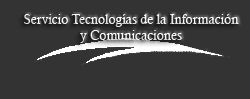
<style>
.page{position:relative;width:250px;height:99px;background:#333333}
.page>*{position:absolute;margin:0}
.t1{font:13px "CalistoMT";color:#ffffff}
</style>
<div class="page">
<p class="t1" style="left:24px;top:14px;width:215px;height:29px;text-align:center">Servicio Tecnologías de la Información<br>y Comunicaciones</p>
</div>
